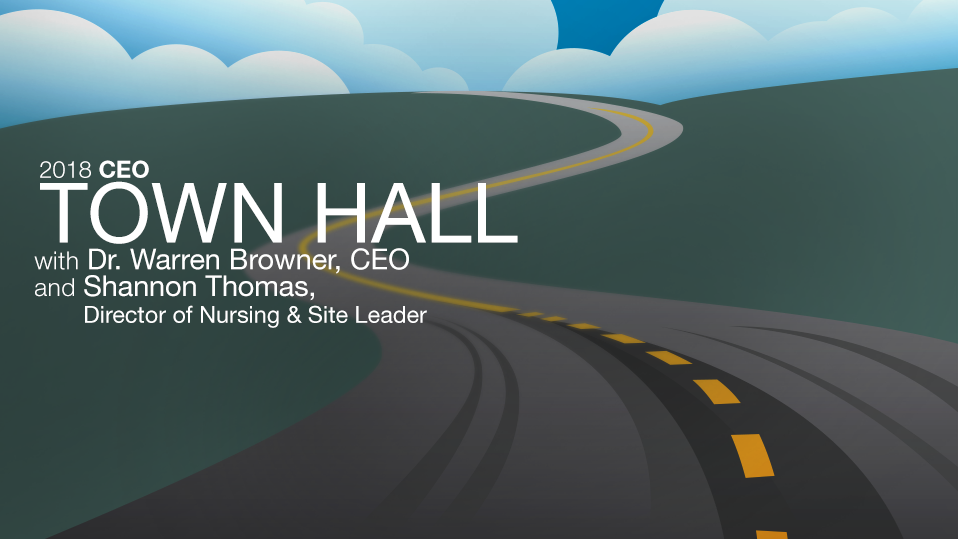
<style>
.page{position:relative;width:958px;height:539px}
.page>*{position:absolute;margin:0}
.t1{font:23.4px/26.7px "HelveticaNeueLTStd-Roman";color:#ffffff}
.t2{font:23.6px/62.7px "HelveticaNeueLTPro-Lt";color:#ffffff}
.t3{font:23.6px/62.7px "HelveticaNeueLTPro-Bd";color:#ffffff}
.t4{font:83.3px/64.8px "HelveticaNeueLTStd-Roman";color:#ffffff}
.t5{font:24.7px/26.7px "HelveticaNeueLTStd-Lt";letter-spacing:0.02em;color:#ffffff}
.t6{font:28.7px/26.7px "HelveticaNeueLTStd-Roman";color:#ffffff}
</style>
<div class="page">
<p class="t1" style="left:34px;top:160px;width:484px;height:168px"><span class="t2">2018</span><span class="t3"> CEO<br></span><span class="t4">TOWN HALL<br></span><span class="t5">with </span><span class="t6">Dr. Warren Browner, CEO<br></span><span class="t5">and </span><span class="t6">Shannon Thomas, <br>      </span>Director of Nursing &amp; Site Leader</p>
</div>
